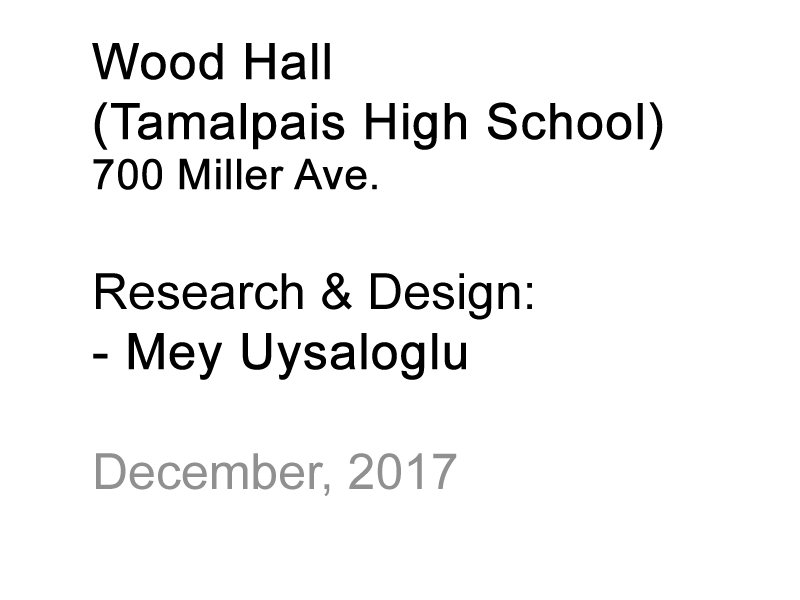
<style>
.page{position:relative;width:800px;height:600px;background:#ffffff}
.page>*{position:absolute;margin:0}
.t1{font:50px "ArialMT";color:#000000;font-weight:bold}
.t2{font:41.7px "ArialMT";color:#000000;font-weight:bold}
.t3{font:50px "ArialMT";color:#000000}
.t4{font:50px "ArialMT";color:#919090}
</style>
<div class="page">
<p class="t1" style="left:92px;top:43px;width:571px;height:454px">Wood Hall<br>(Tamalpais High School)<br><span class="t2">700 Miller Ave.<br></span><span class="t3"><br>Research &amp; Design:<br></span>- Mey Uysaloglu<br><br><span class="t4">December, 2017</span></p>
</div>
